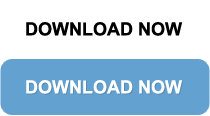
<style>
.page{position:relative;width:210px;height:116px;background:#ffffff}
.page>*{position:absolute;margin:0}
.t1{font:18px "Arial-BoldMT";color:#000000;text-transform:uppercase}
.t2{font:18px "Arial-BoldMT";color:#ffffff;text-transform:uppercase}
</style>
<div class="page">
<p class="t1" style="left:26px;top:22px;width:156px;height:14px">Download Now</p>
<p class="t2" style="left:26px;top:80px;width:156px;height:14px">Download Now</p>
</div>
